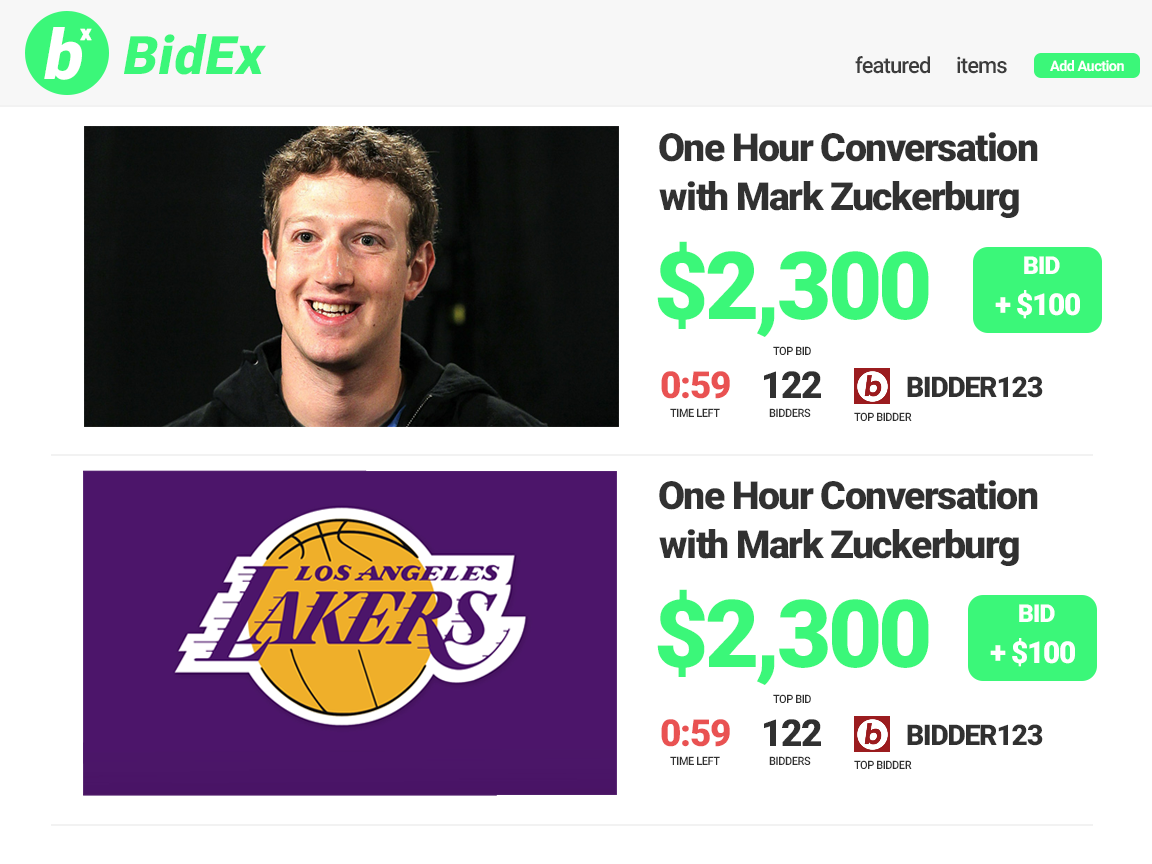
<style>
.page{position:relative;width:1152px;height:864px;background:#ffffff}
.page>*{position:absolute;margin:0}
.t1{font:69.3px "Roboto-Black";letter-spacing:-0.06em;color:#ffffff;font-style:italic}
.t2{font:21.3px "Roboto-Black";letter-spacing:-0.06em;color:#ffffff;font-weight:bold}
.t3{font:53.3px "Roboto-Black";letter-spacing:0.02em;color:#3bf779;font-style:italic}
.t4{font:22.2px "Roboto-Medium";letter-spacing:-0.04em;color:#3c3c3c}
.t5{font:14.4px "Roboto-Bold";letter-spacing:-0.04em;color:#ffffff}
.t6{font:38.8px "Roboto-Black";letter-spacing:-0.04em;color:#313131}
.t7{font:94.1px "Roboto-Black";letter-spacing:-0.04em;color:#3bf779}
.t8{font:24.9px "Roboto-Black";letter-spacing:-0.04em;color:#ffffff}
.t9{font:30.2px "Roboto-Black";letter-spacing:-0.04em;color:#ffffff}
.t10{font:11.5px "Roboto-Medium";letter-spacing:-0.04em;color:#313131;scale:0.95 1}
.t11{font:37.3px "Roboto-Black";letter-spacing:-0.04em;color:#e95252}
.t12{font:37.3px "Roboto-Black";letter-spacing:-0.04em;color:#313131}
.t13{font:28.4px "Roboto-Black";letter-spacing:-0.04em;color:#313131}
</style>
<div class="page">
<p class="t1" style="left:44px;top:27px;width:38px;height:53px">b</p>
<p class="t2" style="left:80px;top:28px;width:12px;height:13px">x</p>
<p class="t3" style="left:124px;top:34px;width:142px;height:41px">BidEx</p>
<p class="t4" style="left:855px;top:56px;width:75px;height:18px">featured</p>
<p class="t4" style="left:957px;top:56px;width:50px;height:18px">items</p>
<p class="t5" style="left:1050px;top:60px;width:74px;height:12px">Add Auction</p>
<p class="t6" style="left:659px;top:132px;width:379px;height:30px">One Hour Conversation</p>
<p class="t6" style="left:659px;top:181px;width:360px;height:37px">with Mark Zuckerburg</p>
<p class="t7" style="left:657px;top:241px;width:272px;height:96px">$2,300</p>
<p class="t8" style="left:1024px;top:256px;width:36px;height:18px">BID</p>
<p class="t9" style="left:995px;top:290px;width:85px;height:29px">+ $100</p>
<p class="t10" style="left:773px;top:346px;width:38px;height:9px">TOP BID</p>
<p class="t11" style="left:661px;top:371px;width:69px;height:28px">0:59</p>
<p class="t12" style="left:764px;top:371px;width:57px;height:27px">122</p>
<p class="t13" style="left:907px;top:376px;width:136px;height:22px">BIDDER123</p>
<p class="t10" style="left:670px;top:408px;width:50px;height:9px">TIME LEFT</p>
<p class="t10" style="left:769px;top:408px;width:42px;height:9px">BIDDERS</p>
<p class="t10" style="left:854px;top:412px;width:58px;height:9px">TOP BIDDER</p>
<p class="t6" style="left:659px;top:480px;width:379px;height:30px">One Hour Conversation</p>
<p class="t6" style="left:659px;top:529px;width:360px;height:37px">with Mark Zuckerburg</p>
<p class="t7" style="left:657px;top:589px;width:272px;height:96px">$2,300</p>
<p class="t8" style="left:1019px;top:604px;width:36px;height:18px">BID</p>
<p class="t9" style="left:990px;top:638px;width:85px;height:29px">+ $100</p>
<p class="t10" style="left:773px;top:694px;width:38px;height:9px">TOP BID</p>
<p class="t11" style="left:661px;top:719px;width:69px;height:28px">0:59</p>
<p class="t12" style="left:764px;top:719px;width:57px;height:27px">122</p>
<p class="t13" style="left:907px;top:724px;width:136px;height:22px">BIDDER123</p>
<p class="t10" style="left:670px;top:756px;width:50px;height:9px">TIME LEFT</p>
<p class="t10" style="left:769px;top:756px;width:42px;height:9px">BIDDERS</p>
<p class="t10" style="left:854px;top:760px;width:58px;height:9px">TOP BIDDER</p>
</div>
